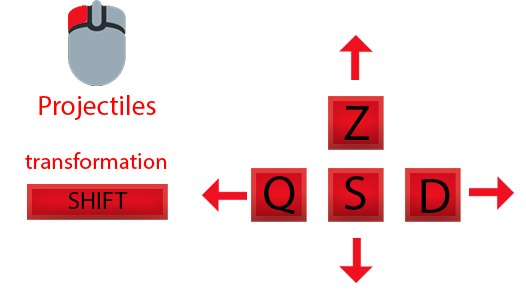
<style>
.page{position:relative;width:526px;height:300px;background:#ffffff}
.page>*{position:absolute;margin:0}
.t1{font:27.8px "MyriadPro-Regular";color:#ff0000}
.t2{font:50px "MyriadPro-Regular";color:#000000}
.t3{font:22.9px "MyriadPro-Regular";color:#ff0000}
.t4{font:25px "MyriadPro-Regular";color:#000000}
</style>
<div class="page">
<p class="t1" style="left:39px;top:95px;width:117px;height:25px">Projectiles</p>
<p class="t2" style="left:344px;top:106px;width:25px;height:34px">Z</p>
<p class="t3" style="left:25px;top:152px;width:142px;height:17px">transformation</p>
<p class="t2" style="left:264px;top:176px;width:31px;height:39px">Q</p>
<p class="t2" style="left:344px;top:176px;width:22px;height:34px">S</p>
<p class="t2" style="left:421px;top:179px;width:29px;height:34px">D</p>
<p class="t4" style="left:68px;top:192px;width:60px;height:17px">SHIFT</p>
</div>
